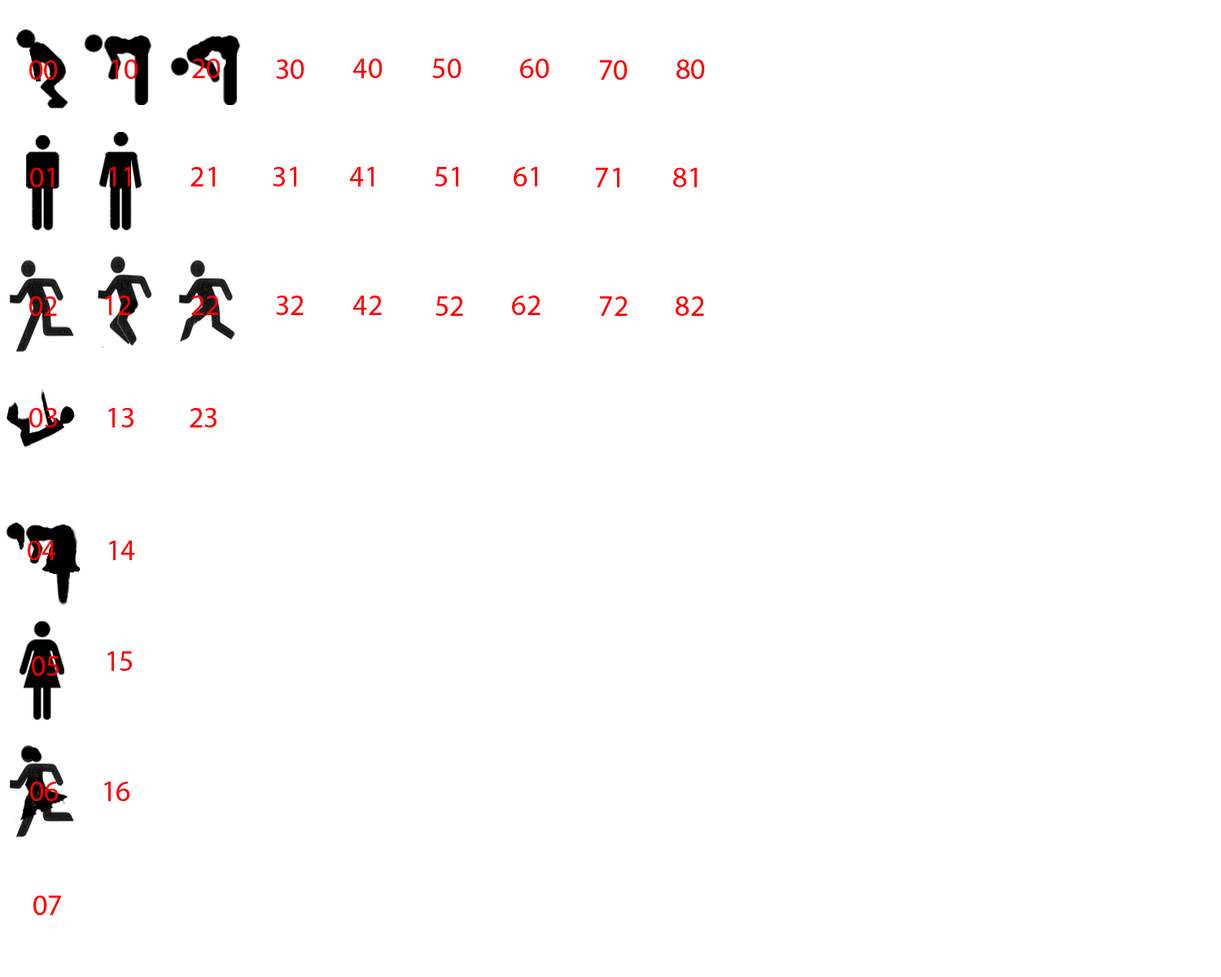
<style>
.page{position:relative;width:1221px;height:977px;background:#ffffff}
.page>*{position:absolute;margin:0}
.t1{font:29.3px "MyriadPro-Regular";color:#ff0000}
</style>
<div class="page">
<p class="t1" style="left:29px;top:60px;width:29px;height:20px">00</p>
<p class="t1" style="left:112px;top:59px;width:26px;height:20px">10</p>
<p class="t1" style="left:192px;top:59px;width:29px;height:19px">20</p>
<p class="t1" style="left:276px;top:59px;width:28px;height:20px">30</p>
<p class="t1" style="left:352px;top:59px;width:31px;height:19px">40</p>
<p class="t1" style="left:432px;top:59px;width:29px;height:19px">50</p>
<p class="t1" style="left:520px;top:59px;width:29px;height:19px">60</p>
<p class="t1" style="left:600px;top:60px;width:28px;height:20px">70</p>
<p class="t1" style="left:676px;top:59px;width:29px;height:20px">80</p>
<p class="t1" style="left:30px;top:168px;width:24px;height:19px">01</p>
<p class="t1" style="left:109px;top:167px;width:21px;height:19px">11</p>
<p class="t1" style="left:190px;top:167px;width:25px;height:19px">21</p>
<p class="t1" style="left:273px;top:167px;width:23px;height:19px">31</p>
<p class="t1" style="left:349px;top:167px;width:25px;height:19px">41</p>
<p class="t1" style="left:435px;top:167px;width:23px;height:19px">51</p>
<p class="t1" style="left:514px;top:167px;width:23px;height:19px">61</p>
<p class="t1" style="left:596px;top:168px;width:23px;height:19px">71</p>
<p class="t1" style="left:673px;top:168px;width:24px;height:19px">81</p>
<p class="t1" style="left:29px;top:296px;width:28px;height:20px">02</p>
<p class="t1" style="left:105px;top:295px;width:26px;height:20px">12</p>
<p class="t1" style="left:191px;top:295px;width:28px;height:20px">22</p>
<p class="t1" style="left:276px;top:295px;width:28px;height:20px">32</p>
<p class="t1" style="left:352px;top:295px;width:30px;height:20px">42</p>
<p class="t1" style="left:435px;top:296px;width:28px;height:20px">52</p>
<p class="t1" style="left:512px;top:295px;width:28px;height:20px">62</p>
<p class="t1" style="left:600px;top:296px;width:28px;height:20px">72</p>
<p class="t1" style="left:676px;top:296px;width:28px;height:20px">82</p>
<p class="t1" style="left:29px;top:408px;width:28px;height:19px">03</p>
<p class="t1" style="left:108px;top:408px;width:25px;height:19px">13</p>
<p class="t1" style="left:190px;top:408px;width:27px;height:19px">23</p>
<p class="t1" style="left:28px;top:540px;width:28px;height:20px">04</p>
<p class="t1" style="left:109px;top:540px;width:26px;height:20px">14</p>
<p class="t1" style="left:107px;top:651px;width:25px;height:20px">15</p>
<p class="t1" style="left:32px;top:656px;width:27px;height:20px">05</p>
<p class="t1" style="left:30px;top:781px;width:29px;height:20px">06</p>
<p class="t1" style="left:104px;top:781px;width:26px;height:20px">16</p>
<p class="t1" style="left:33px;top:895px;width:28px;height:20px">07</p>
</div>
